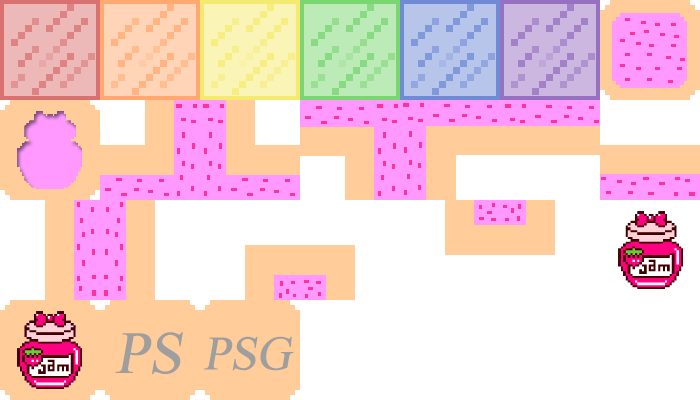
<style>
.page{position:relative;width:700px;height:400px;background:#ffffff}
.page>*{position:absolute;margin:0}
.t1{font:60px "TimesNewRomanPSMT";color:#9e9e9e;font-style:italic}
.t2{font:48px "TimesNewRomanPSMT";color:#9e9e9e;font-style:italic}
</style>
<div class="page">
<p class="t1" style="left:115px;top:332px;width:68px;height:42px">PS</p>
<p class="t2" style="left:203px;top:336px;width:91px;height:35px">PSG</p>
</div>
